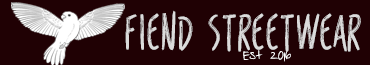
<style>
.page{position:relative;width:370px;height:65px;background:#200104}
.page>*{position:absolute;margin:0}
.t1{font:48px "REIS-Regular";color:#dbdbdb}
.t2{font:18px "Fofer";color:#ffffff}
</style>
<div class="page">
<p class="t1" style="left:125px;top:10px;width:236px;height:42px">Fiend Streetwear</p>
<p class="t2" style="left:243px;top:49px;width:48px;height:13px">Est 2016</p>
</div>
